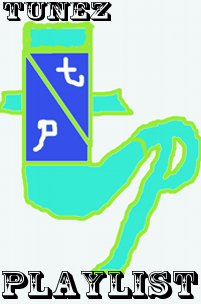
<style>
.page{position:relative;width:201px;height:304px;background:#f1f7f7}
.page>*{position:absolute;margin:0}
.t1{font:25.1px "RosewoodStd-Regular";color:#000000;scale:1.57 1}
.t2{font:36.2px "RosewoodStd-Regular";color:#000000;scale:1.26 1}
</style>
<div class="page">
<p class="t1" style="left:3px;top:2px;width:109px;height:19px">Tunez</p>
<p class="t2" style="left:2px;top:271px;width:196px;height:28px">Playlist</p>
</div>
